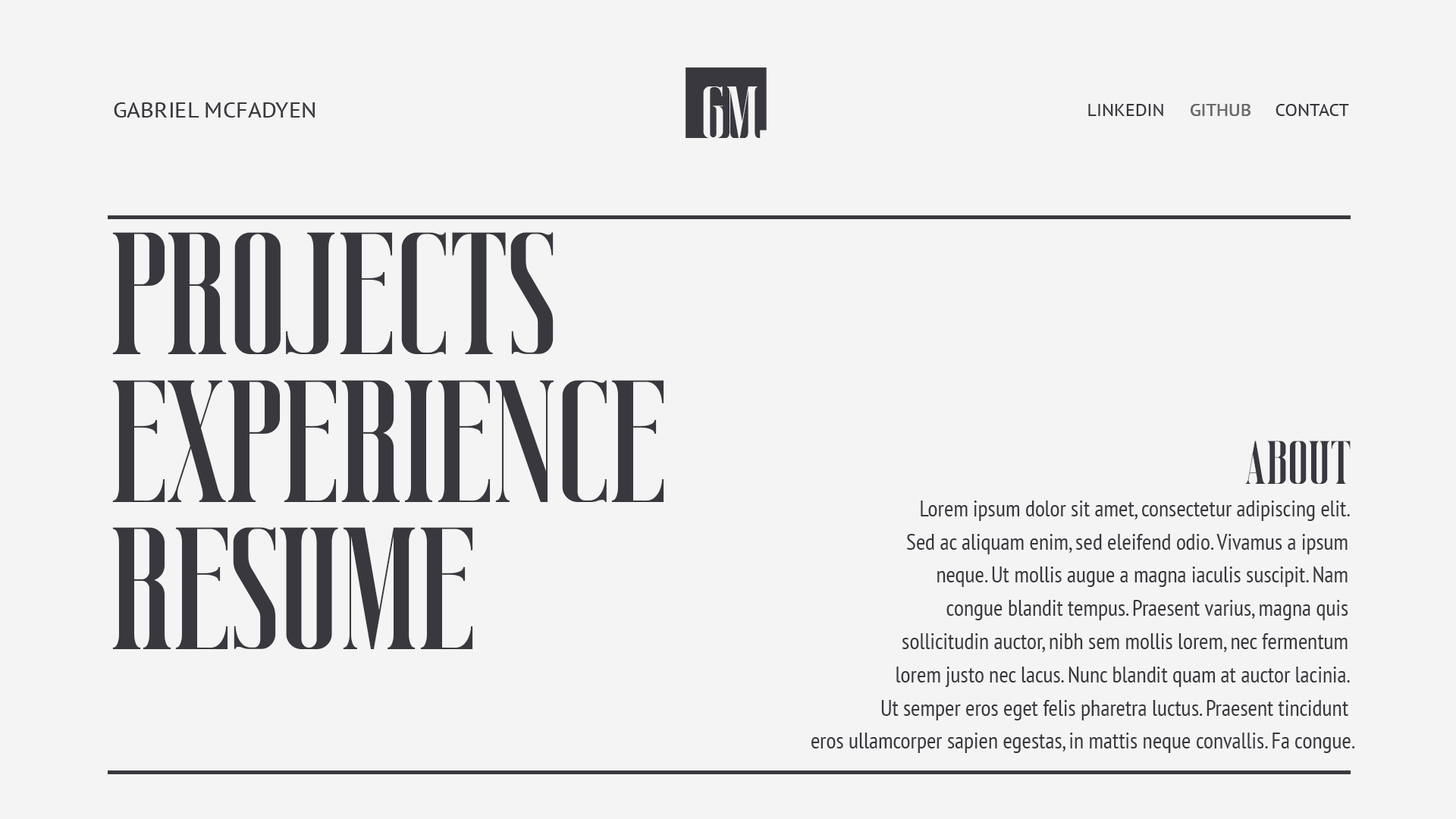
<style>
.page{position:relative;width:1456px;height:819px;background:#f4f4f4}
.page>*{position:absolute;margin:0}
.t1{font:73.7px "Vicenza";color:#f4f4f4}
.t2{font:21.2px "PTSans-Narrow";color:#39383e;scale:1.36 1}
.t3{font:16.8px "PTSans-Narrow";color:#39383e;scale:1.36 1}
.t4{font:16.8px "PTSans-Narrow";color:#6b6b6b;scale:1.36 1}
.t5{font:173.4px "Vicenza";color:#39383e}
.t6{font:61.2px "Vicenza";color:#39383e}
.t7{font:22.7px/33.2px "PTSans-Narrow";color:#39383e}
</style>
<div class="page">
<p class="t1" style="left:703px;top:86px;width:64px;height:52px">GM.</p>
<p class="t2" style="left:114px;top:102px;width:201px;height:16px">GABRIEL MCFADYEN</p>
<p class="t3" style="left:1088px;top:104px;width:75px;height:12px">LINKEDIN</p>
<p class="t4" style="left:1191px;top:104px;width:59px;height:12px">GITHUB</p>
<p class="t4" style="left:1191px;top:104px;width:59px;height:12px">GITHUB</p>
<p class="t3" style="left:1275px;top:104px;width:74px;height:12px">CONTACT</p>
<p class="t5" style="left:112px;top:232px;width:442px;height:122px">PROJECTS</p>
<p class="t5" style="left:112px;top:380px;width:552px;height:122px">EXPERIENCE</p>
<p class="t6" style="left:1245px;top:441px;width:106px;height:43px">ABOUT</p>
<p class="t7" style="left:811px;top:500px;width:544px;height:253px;text-align:right">Lorem ipsum dolor sit amet, consectetur adipiscing elit. <br>Sed ac aliquam enim, sed eleifend odio. Vivamus a ipsum <br>neque. Ut mollis augue a magna iaculis suscipit. Nam <br>congue blandit tempus. Praesent varius, magna quis <br>sollicitudin auctor, nibh sem mollis lorem, nec fermentum <br>lorem justo nec lacus. Nunc blandit quam at auctor lacinia. <br>Ut semper eros eget felis pharetra luctus. Praesent tincidunt <br>eros ullamcorper sapien egestas, in mattis neque convallis. Fa congue.</p>
<p class="t5" style="left:112px;top:527px;width:361px;height:122px">RESUME</p>
</div>
